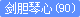
<style>
.page{position:relative;width:80px;height:17px;background:#5e8ffe}
.page>*{position:absolute;margin:0}
.t1{font:12px "SimSun";color:#ffffff}
</style>
<div class="page">
<p class="t1" style="left:5px;top:2px;width:70px;height:12px">剑胆琴心(90)</p>
</div>
